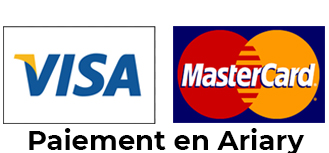
<style>
.page{position:relative;width:329px;height:153px;background:#ffffff}
.page>*{position:absolute;margin:0}
.t1{font:27.8px "Montserrat-Bold";color:#000000}
</style>
<div class="page">
<p class="t1" style="left:29px;top:128px;width:276px;height:27px">Paiement en Ariary</p>
</div>
